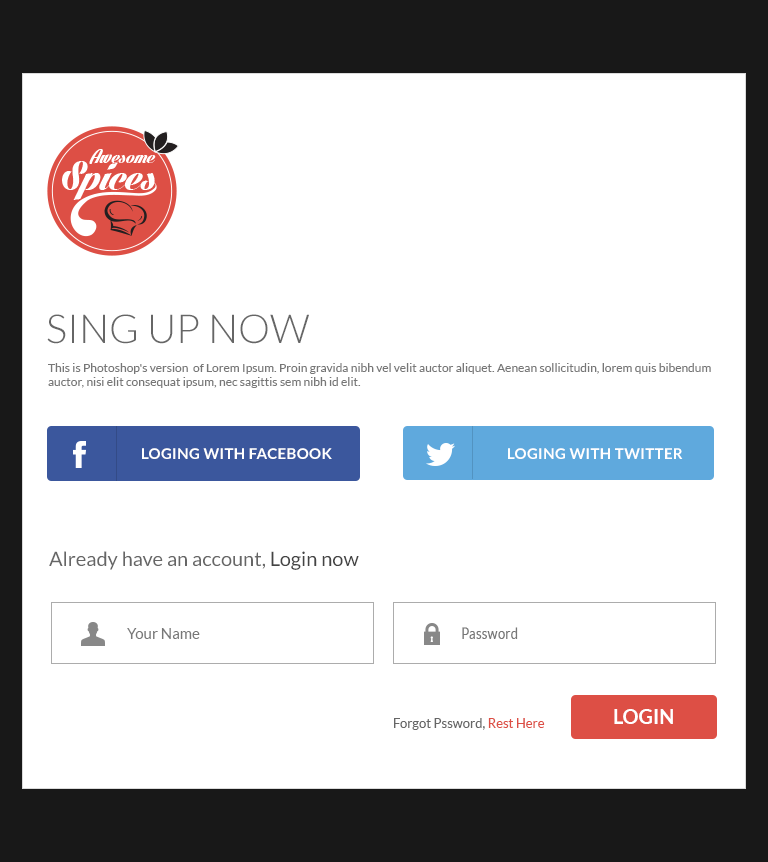
<style>
.page{position:relative;width:768px;height:862px;background:#ffffff}
.page>*{position:absolute;margin:0}
.t1{font:40px "Lato-Light";color:#666666;text-transform:uppercase}
.t2{font:12px "Lato-Regular";color:#777777}
.t3{font:15px "Lato-Bold";letter-spacing:0.025em;color:#ffffff;text-transform:uppercase}
.t4{font:20px "Lato-Regular";color:#666666}
.t5{font:20px "Lato-Regular";color:#444444}
.t6{font:15px "Lato-Regular";color:#777777}
.t7{font:15px "Lato-Regular";color:#777777;scale:0.9 1}
.t8{font:20px "Lato-Bold";color:#ffffff;text-transform:uppercase}
.t9{font:13px "Lato-Regular";color:#666666}
.t10{font:13px "Lato-Regular";color:#dd4f45}
</style>
<div class="page">
<p class="t1" style="left:47px;top:314px;width:262px;height:30px">Sing up now</p>
<p class="t2" style="left:48px;top:363px;width:663px;height:25px">This is Photoshop's version  of Lorem Ipsum. Proin gravida nibh vel velit auctor aliquet. Aenean sollicitudin, lorem quis bibendum auctor, nisi elit consequat ipsum, nec sagittis sem nibh id elit.</p>
<p class="t3" style="left:142px;top:448px;width:190px;height:11px">loging with facebook</p>
<p class="t3" style="left:508px;top:448px;width:175px;height:11px">loging with twitter</p>
<p class="t4" style="left:49px;top:551px;width:310px;height:19px">Already have an account, <span class="t5">Login now</span></p>
<p class="t6" style="left:127px;top:628px;width:73px;height:11px">Your Name</p>
<p class="t7" style="left:462px;top:627px;width:56px;height:12px">Password</p>
<p class="t8" style="left:614px;top:709px;width:59px;height:15px">Login</p>
<p class="t9" style="left:394px;top:718px;width:151px;height:12px">Forgot Pssword, <span class="t10">Rest Here</span></p>
</div>
